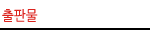
<style>
.page{position:relative;width:150px;height:30px;background:#ffffff}
.page>*{position:absolute;margin:0}
.t1{font:14px "NanumGothic";color:#dc241f;scale:0.9 1}
</style>
<div class="page">
<p class="t1" style="left:2px;top:9px;width:36px;height:13px">출판물</p>
</div>
